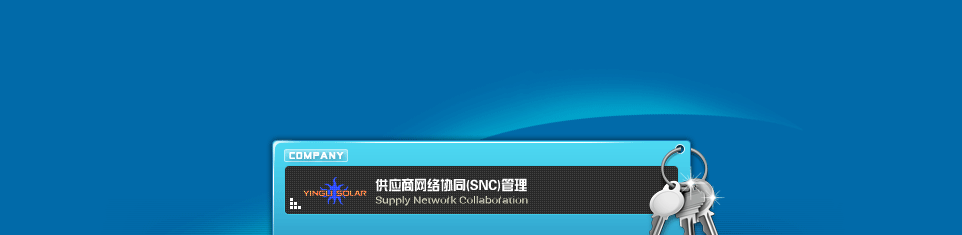
<style>
.page{position:relative;width:962px;height:235px;background:#016aa9}
.page>*{position:absolute;margin:0}
.t1{font:9.7px/16px "Roboto-Regular";letter-spacing:-0.025em;color:#7d7c7c;scale:1.24 1}
.t2{font:13.9px/16px "FZZYJW--GB1-0";letter-spacing:-0.025em;color:#ffffff;scale:0.96 1}
</style>
<div class="page">
<p class="t1" style="left:375px;top:178px;width:153px;height:28px"><span class="t2">供应商网络协同(SNC)管理<br></span>Supply Network Collaboration</p>
</div>
